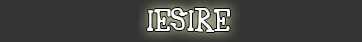
<style>
.page{position:relative;width:362px;height:42px;background:#333333}
.page>*{position:absolute;margin:0}
.t1{font:25px "42";color:#ffffff}
</style>
<div class="page">
<p class="t1" style="left:147px;top:8px;width:83px;height:24px">Iesire</p>
</div>
